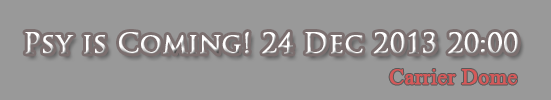
<style>
.page{position:relative;width:551px;height:100px;background:#999999}
.page>*{position:absolute;margin:0}
.t1{font:27px "TrajanPro-Regular";color:#ffffff;font-weight:bold}
.t2{font:22px "MongolianBaiti";color:#d55959;font-weight:bold}
</style>
<div class="page">
<p class="t1" style="left:25px;top:32px;width:493px;height:22px">Psy is Coming! 24 Dec 2013 20:00</p>
<p class="t2" style="left:389px;top:69px;width:128px;height:16px">Carrier Dome</p>
</div>
